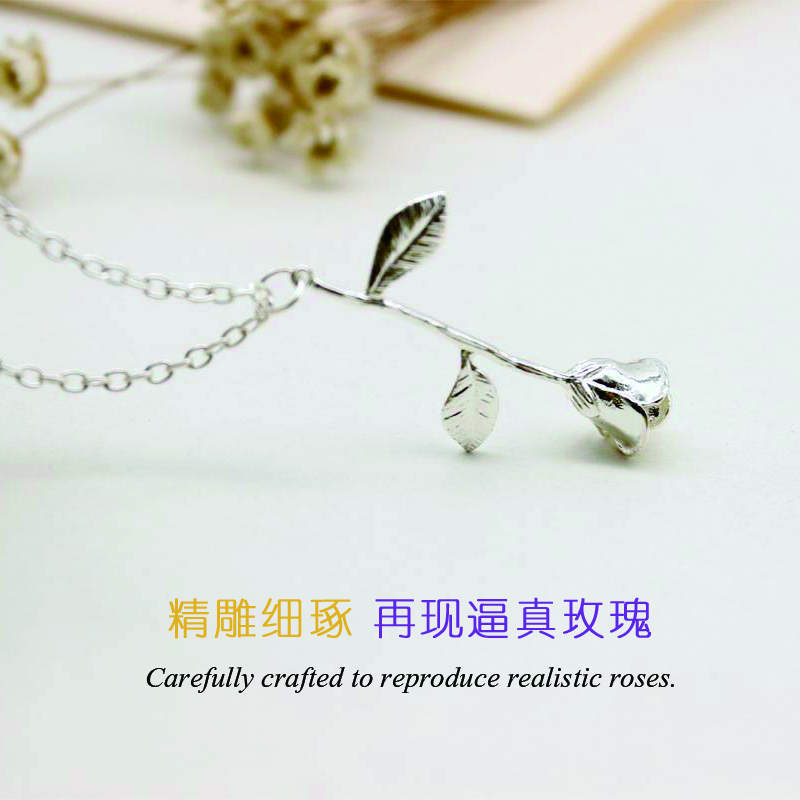
<style>
.page{position:relative;width:800px;height:800px}
.page>*{position:absolute;margin:0}
.t1{font:42px "FZY1JW--GB1-0";letter-spacing:0.1em;color:#5924eb;font-weight:bold}
.t2{font:42px "FZY1JW--GB1-0";letter-spacing:0.1em;color:#e0b11e;font-weight:bold}
.t3{font:36px "Vijaya";color:#040606}
</style>
<div class="page">
<p class="t1" style="left:168px;top:597px;width:483px;height:42px"><span class="t2">精雕细琢 </span>再现逼真玫瑰</p>
<p class="t3" style="left:146px;top:667px;width:528px;height:26px">Carefully crafted to reproduce realistic roses.</p>
</div>
